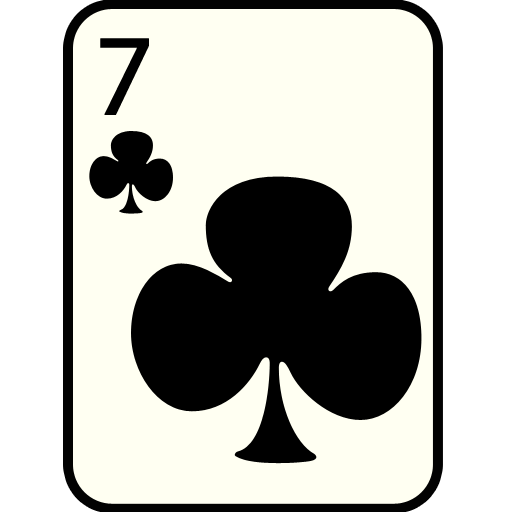
<style>
.page{position:relative;width:512px;height:512px;background:#fffff2}
.page>*{position:absolute;margin:0}
.t1{font:200px "MyriadPro-Regular";letter-spacing:-0.05em;color:#000000;font-variant:small-caps;font-weight:bold}
</style>
<div class="page">
<p class="t1" style="left:100px;top:38px;width:49px;height:77px">7</p>
</div>
